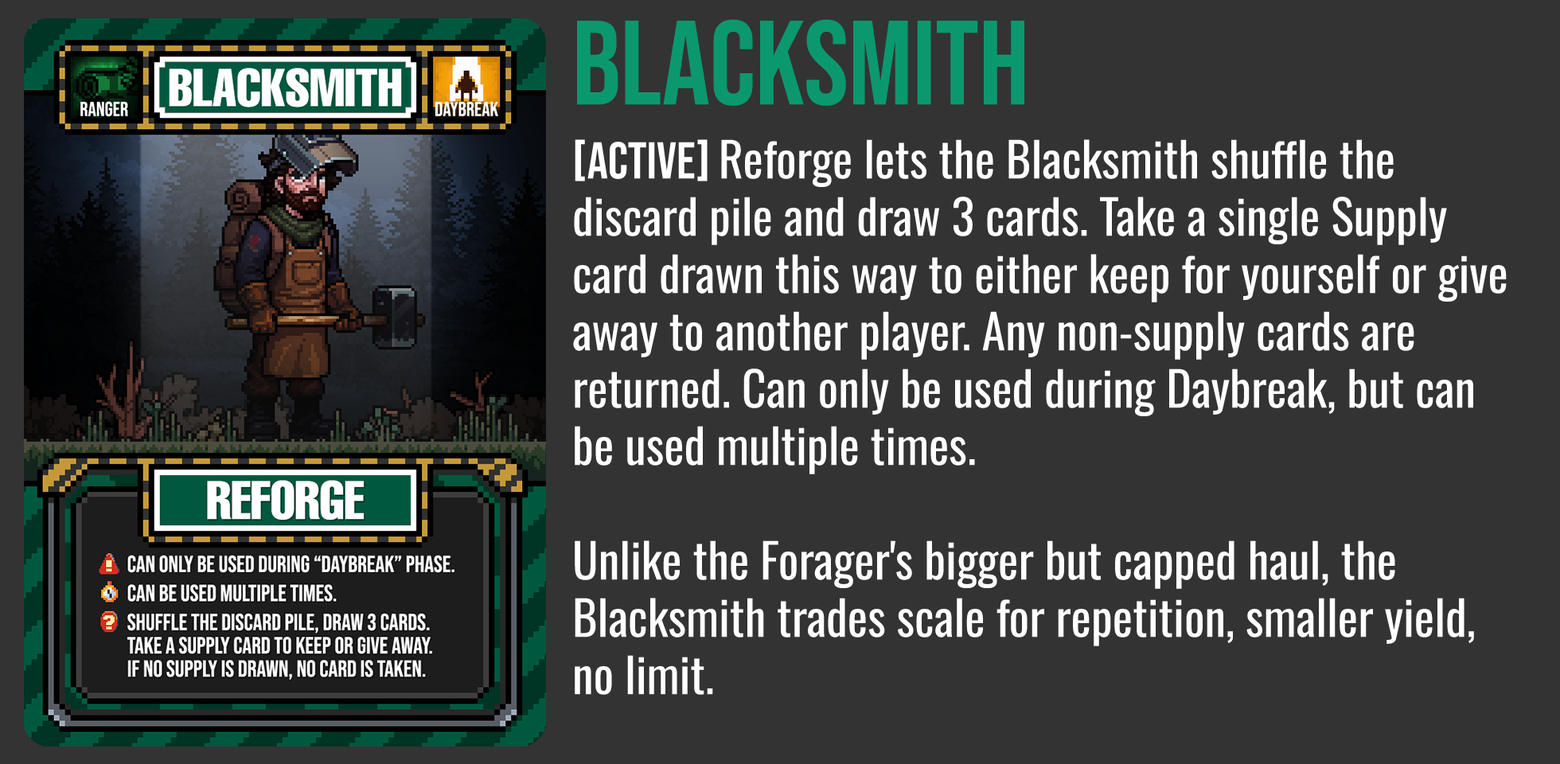
<style>
.page{position:relative;width:1560px;height:764px;background:#333333}
.page>*{position:absolute;margin:0}
.t1{font:119.4px "BebasNeue-Regular";color:#0b986f}
.t2{font:47.8px "Oswald-Regular";color:#ffffff}
.t3{font:51.7px "BebasNeue-Regular";color:#ffffff}
</style>
<div class="page">
<p class="t1" style="left:577px;top:19px;width:448px;height:87px">BLACKSMITH</p>
<p class="t2" style="left:573px;top:139px;width:934px;height:556px"><span class="t3">[ACTIVE] </span>Reforge lets the Blacksmith shuffle the discard pile and draw 3 cards. Take a single Supply card drawn this way to either keep for yourself or give away to another player. Any non-supply cards are returned. Can only be used during Daybreak, but can be used multiple times.<br><br>Unlike the Forager's bigger but capped haul, the Blacksmith trades scale for repetition, smaller yield, no limit.</p>
</div>
